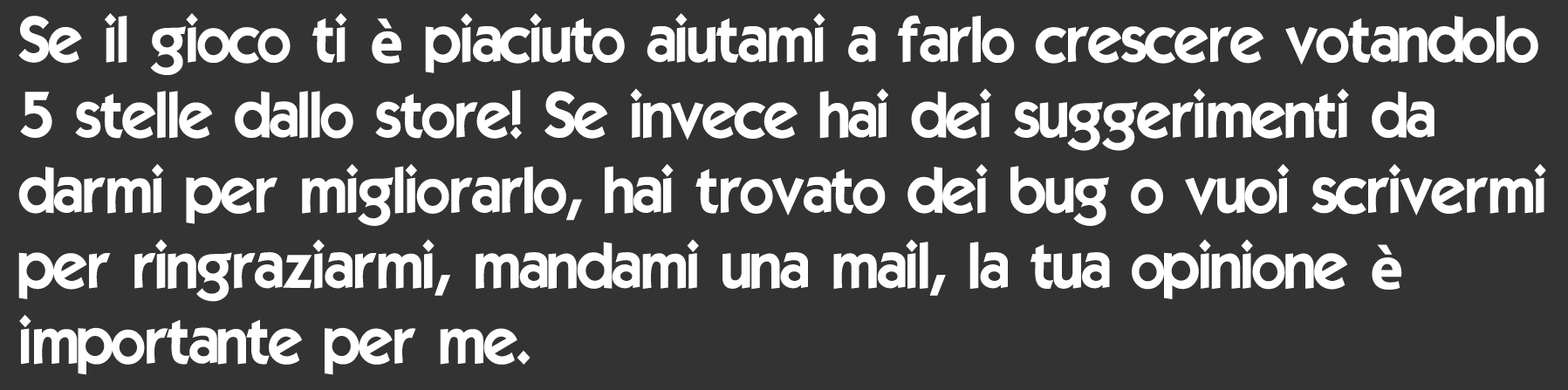
<style>
.page{position:relative;width:1568px;height:390px;background:#333333}
.page>*{position:absolute;margin:0}
.t1{font:62.8px "ELEGANCE";color:#ffffff}
.t2{font:62.8px "MyriadPro-Bold";color:#ffffff}
</style>
<div class="page">
<p class="t1" style="left:18px;top:13px;width:1528px;height:362px">Se il gioco ti <span class="t2">è</span> piaciuto aiutami a farlo crescere votandolo<br>5 stelle dallo store! Se invece hai dei suggerimenti da<br>darmi per migliorarlo, hai trovato dei bug o vuoi scrivermi<br>per ringraziarmi, mandami una mail, la tua opinione <span class="t2">è</span><br>importante per me.</p>
</div>
